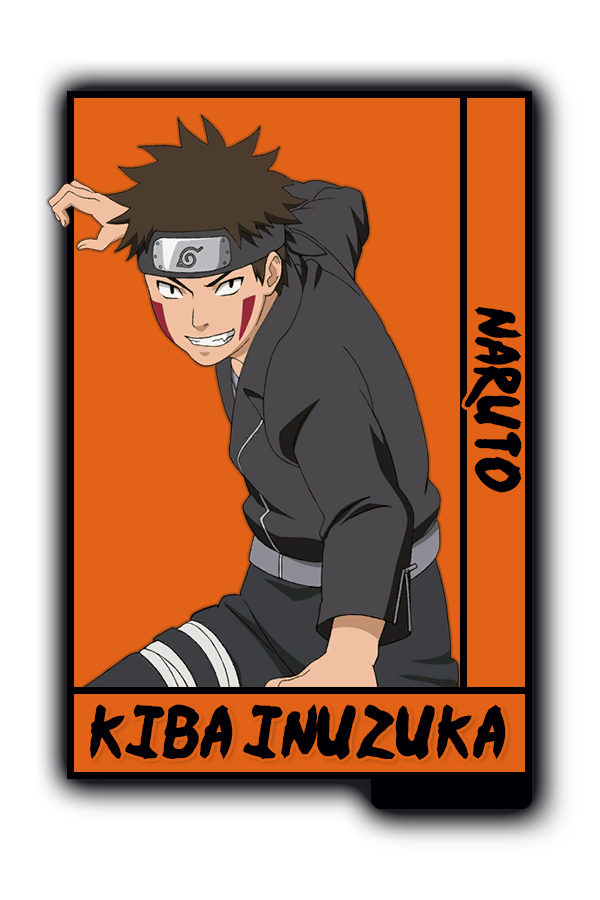
<style>
.page{position:relative;width:600px;height:900px;background:#e26317}
.page>*{position:absolute;margin:0}
.t1{font:52px "Ninja-Naruto";color:#010005}
.t2{font:60.3px "Ninja-Naruto";color:#010005}
</style>
<div class="page">
<p class="t1" style="left:464px;top:307px;width:59px;height:186px;rotate:90deg">Naruto</p>
<p class="t2" style="left:89px;top:703px;width:417px;height:57px">Kiba Inuzuka</p>
</div>
